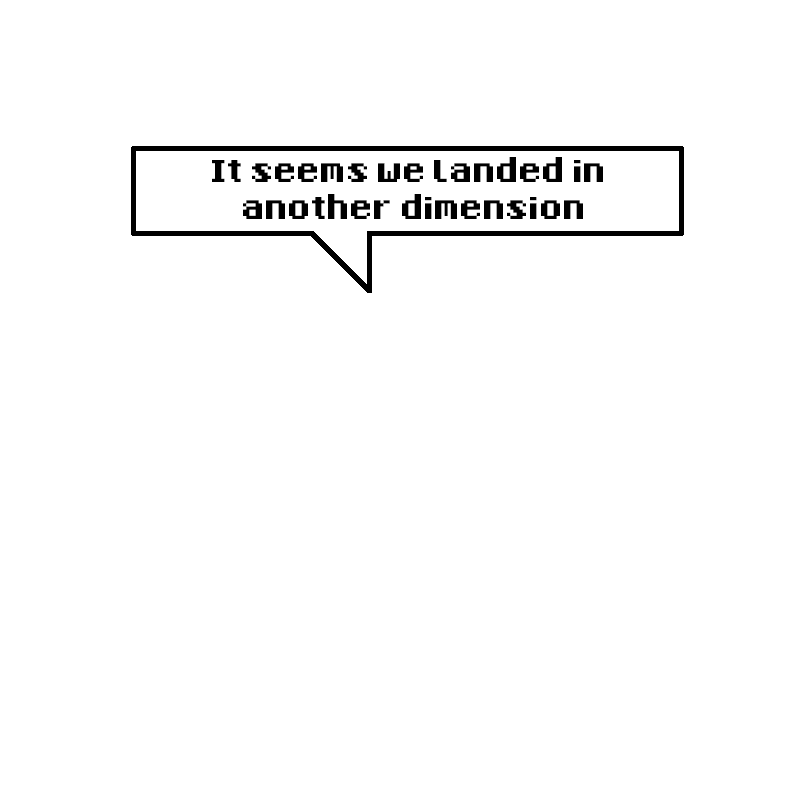
<style>
.page{position:relative;width:800px;height:800px;background:#ffffff}
.page>*{position:absolute;margin:0}
.t1{font:50px/37.5px "8-Bit-Madness";letter-spacing:-0.04em;color:#000000}
</style>
<div class="page">
<p class="t1" style="left:212px;top:157px;width:391px;height:62px;text-align:center">It seems we landed in <br>another dimension</p>
</div>
